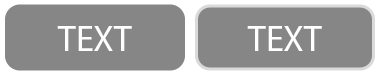
<style>
.page{position:relative;width:380px;height:75px;background:#868686}
.page>*{position:absolute;margin:0}
.t1{font:36px "MyriadPro-Regular";color:#ffffff}
</style>
<div class="page">
<p class="t1" style="left:57px;top:26px;width:75px;height:25px">TEXT</p>
<p class="t1" style="left:247px;top:26px;width:75px;height:25px">TEXT</p>
</div>
